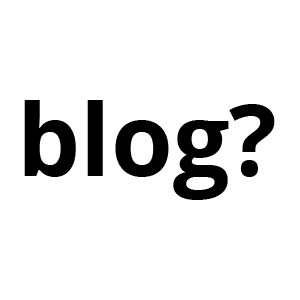
<style>
.page{position:relative;width:300px;height:300px;background:#ffffff}
.page>*{position:absolute;margin:0}
.t1{font:100px "OpenSans-Bold";color:#000000}
</style>
<div class="page">
<p class="t1" style="left:24px;top:100px;width:251px;height:100px">blog?</p>
</div>
